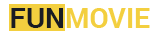
<style>
.page{position:relative;width:160px;height:37px;background:#ffffff}
.page>*{position:absolute;margin:0}
.t1{font:28px "Roboto-Bold";color:#f3cf3f;text-transform:uppercase}
.t2{font:28px "Roboto-Bold";color:#191b23;text-transform:uppercase}
</style>
<div class="page">
<p class="t1" style="left:11px;top:8px;width:139px;height:20px"><span class="t2">Fun</span>movie</p>
</div>
